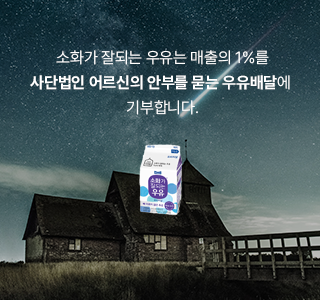
<style>
.page{position:relative;width:320px;height:300px}
.page>*{position:absolute;margin:0}
.t1{font:16px/25px "Pretendard-Bold";letter-spacing:-0.01em;color:#ffffff}
.t2{font:16px/25px "Pretendard-Light";letter-spacing:-0.01em;color:#ffffff}
</style>
<div class="page">
<p class="t1" style="left:30px;top:50px;width:260px;height:65px;text-align:center"><span class="t2">소화가 잘되는 우유는 매출의 1%를<br></span>사단법인 어르신의 안부를 묻는 우유배달<span class="t2">에 <br>기부합니다.</span></p>
</div>
